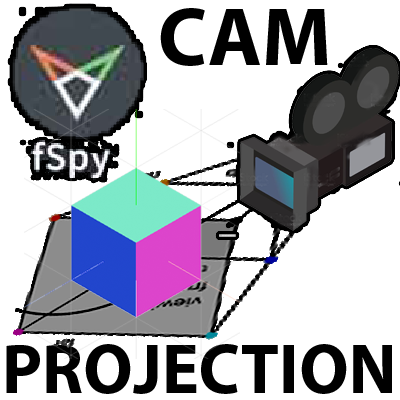
<style>
.page{position:relative;width:400px;height:400px;background:#ffffff}
.page>*{position:absolute;margin:0}
.t1{font:82.4px "MyriadPro-Bold";color:#000000}
.t2{font:70.8px "MyriadPro-Bold";color:#000000}
</style>
<div class="page">
<p class="t1" style="left:160px;top:8px;width:168px;height:58px">CAM</p>
<p class="t2" style="left:6px;top:344px;width:386px;height:50px">PROJECTION</p>
</div>
